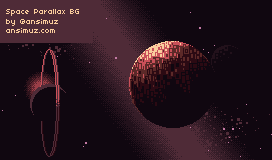
<style>
.page{position:relative;width:272px;height:160px;background:#100710}
.page>*{position:absolute;margin:0}
.t1{font:8.1px "04b03";color:#facd9d}
</style>
<div class="page">
<p class="t1" style="left:6px;top:9px;width:73px;height:24px">Space Parallax BG<br>by @ansimuz<br>ansimuz.com</p>
</div>
